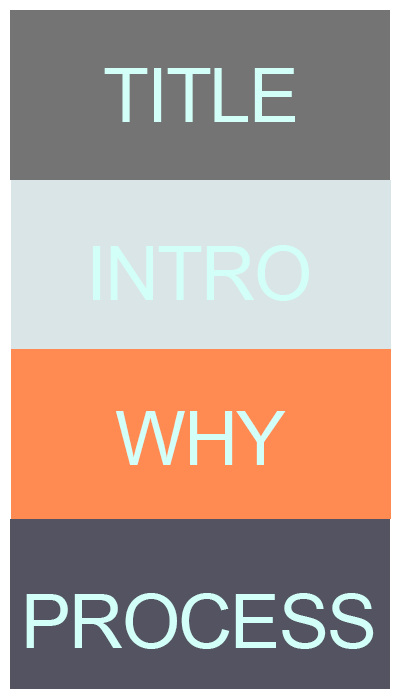
<style>
.page{position:relative;width:400px;height:700px;background:#dae5e7}
.page>*{position:absolute;margin:0}
.t1{font:75px "ArialMT";letter-spacing:-0.025em;color:#d2fff7}
</style>
<div class="page">
<p class="t1" style="left:104px;top:68px;width:191px;height:54px">TITLE</p>
<p class="t1" style="left:93px;top:245px;width:216px;height:56px">INTRO</p>
<p class="t1" style="left:116px;top:411px;width:170px;height:54px">WHY</p>
<p class="t1" style="left:26px;top:593px;width:348px;height:56px">PROCESS</p>
</div>
